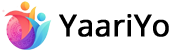
<style>
.page{position:relative;width:176px;height:51px;background:#ffffff}
.page>*{position:absolute;margin:0}
.t1{font:30px "OpenSans-Regular";color:#000000;font-weight:bold}
.t2{font:30px "OpenSans-Regular";color:#000000;text-transform:uppercase;font-weight:bold}
</style>
<div class="page">
<p class="t1" style="left:59px;top:14px;width:110px;height:23px"><span class="t2">Y</span>aariYo</p>
</div>
